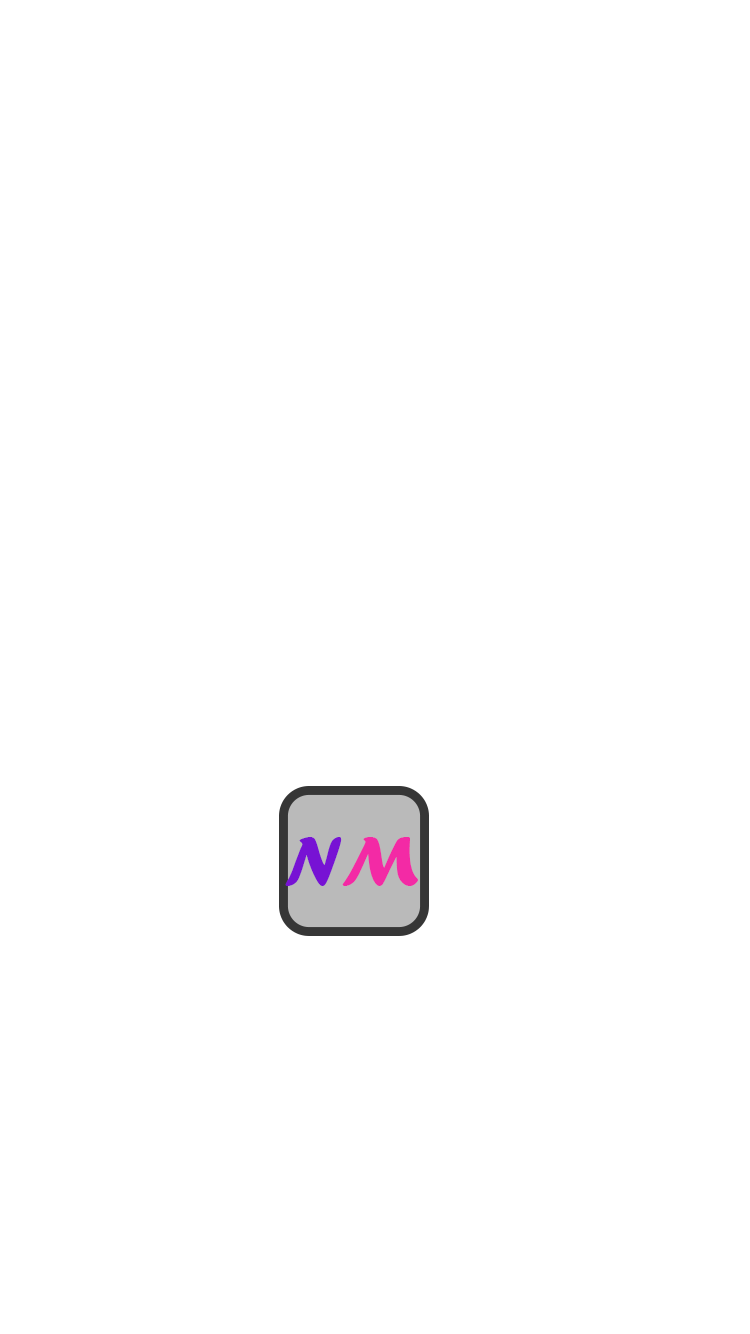
<style>
.page{position:relative;width:750px;height:1334px;background:#ffffff}
.page>*{position:absolute;margin:0}
.t1{font:72px "ForteMT";color:#7712d4}
.t2{font:72px "ForteMT";color:#f32aa5}
</style>
<div class="page">
<p class="t1" style="left:285px;top:837px;width:133px;height:49px">N<span class="t2">M</span></p>
</div>
